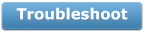
<style>
.page{position:relative;width:145px;height:32px}
.page>*{position:absolute;margin:0}
.t1{font:15px "Verdana-Bold";color:#ffffff}
</style>
<div class="page">
<p class="t1" style="left:16px;top:7px;width:112px;height:13px">Troubleshoot</p>
</div>
